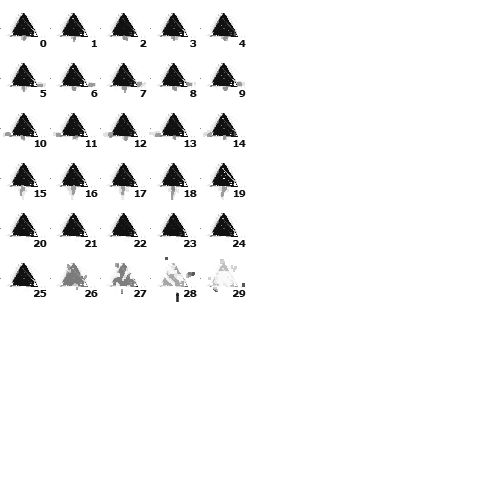
<style>
.page{position:relative;width:500px;height:500px;background:#ffffff}
.page>*{position:absolute;margin:0}
.t1{font:10px "Verdana-Bold";letter-spacing:-0.06em;color:#111111;font-variant:small-caps}
</style>
<div class="page">
<p class="t1" style="left:40px;top:40px;width:7px;height:7px">0</p>
<p class="t1" style="left:91px;top:40px;width:6px;height:7px">1</p>
<p class="t1" style="left:140px;top:40px;width:7px;height:7px">2</p>
<p class="t1" style="left:190px;top:40px;width:7px;height:7px">3</p>
<p class="t1" style="left:239px;top:40px;width:7px;height:7px">4</p>
<p class="t1" style="left:40px;top:90px;width:7px;height:7px">5</p>
<p class="t1" style="left:91px;top:90px;width:7px;height:7px">6</p>
<p class="t1" style="left:140px;top:90px;width:7px;height:7px">7</p>
<p class="t1" style="left:190px;top:90px;width:7px;height:7px">8</p>
<p class="t1" style="left:239px;top:90px;width:7px;height:7px">9</p>
<p class="t1" style="left:34px;top:140px;width:13px;height:7px">10</p>
<p class="t1" style="left:85px;top:140px;width:12px;height:7px">11</p>
<p class="t1" style="left:134px;top:140px;width:13px;height:7px">12</p>
<p class="t1" style="left:184px;top:140px;width:13px;height:7px">13</p>
<p class="t1" style="left:233px;top:140px;width:13px;height:7px">14</p>
<p class="t1" style="left:34px;top:190px;width:13px;height:7px">15</p>
<p class="t1" style="left:85px;top:190px;width:13px;height:7px">16</p>
<p class="t1" style="left:134px;top:190px;width:13px;height:7px">17</p>
<p class="t1" style="left:184px;top:190px;width:13px;height:7px">18</p>
<p class="t1" style="left:233px;top:190px;width:13px;height:7px">19</p>
<p class="t1" style="left:34px;top:240px;width:13px;height:7px">20</p>
<p class="t1" style="left:85px;top:240px;width:12px;height:7px">21</p>
<p class="t1" style="left:134px;top:240px;width:13px;height:7px">22</p>
<p class="t1" style="left:184px;top:240px;width:13px;height:7px">23</p>
<p class="t1" style="left:233px;top:240px;width:13px;height:7px">24</p>
<p class="t1" style="left:34px;top:290px;width:13px;height:7px">25</p>
<p class="t1" style="left:85px;top:290px;width:13px;height:7px">26</p>
<p class="t1" style="left:134px;top:290px;width:13px;height:7px">27</p>
<p class="t1" style="left:184px;top:290px;width:13px;height:7px">28</p>
<p class="t1" style="left:233px;top:290px;width:13px;height:7px">29</p>
</div>
